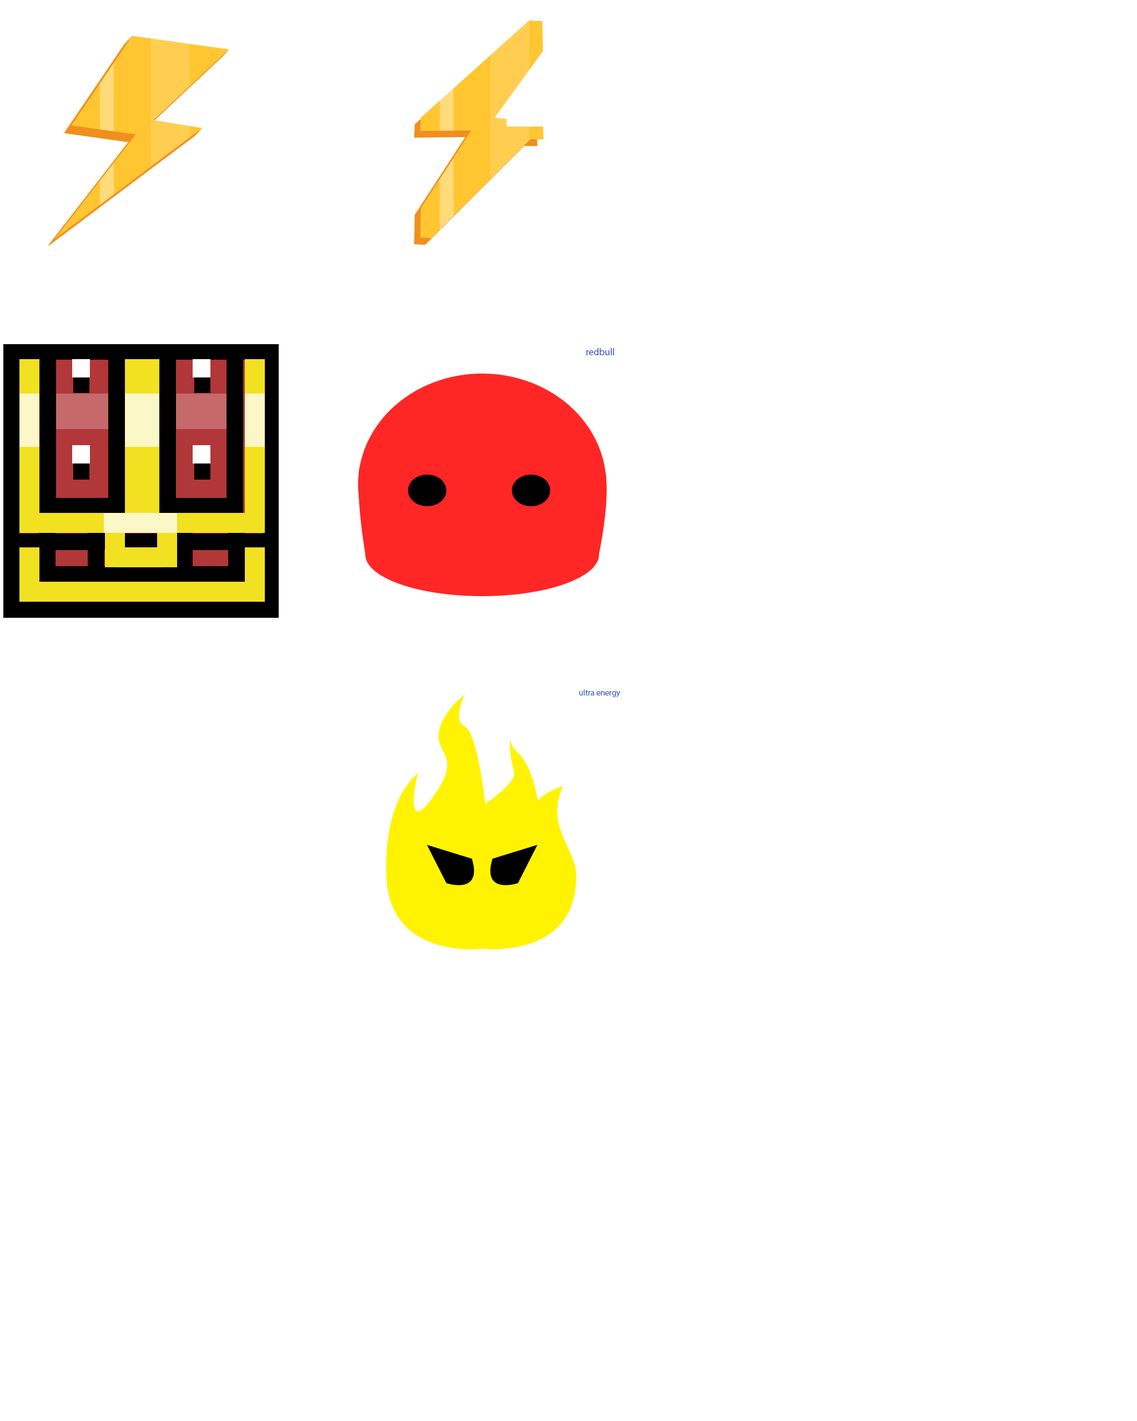
<style>
.page{position:relative;width:1137px;height:1421px;background:#ffffff}
.page>*{position:absolute;margin:0}
.t1{font:9.8px "MyriadPro-Regular";color:#3c59c5}
.t2{font:8.2px "MyriadPro-Regular";color:#3c59c5}
</style>
<div class="page">
<p class="t1" style="left:586px;top:348px;width:28px;height:7px">redbull</p>
<p class="t2" style="left:579px;top:689px;width:41px;height:8px">ultra energy</p>
</div>
